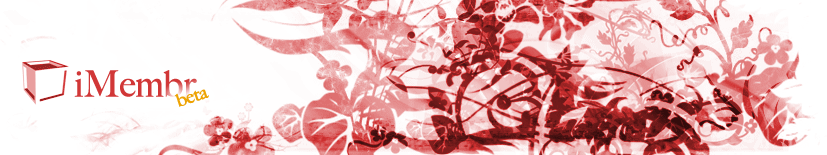
<style>
.page{position:relative;width:827px;height:155px;background:#ffffff}
.page>*{position:absolute;margin:0}
.t1{font:36px "BigCaslon-Medium";letter-spacing:-0.025em;color:#d13737;font-weight:bold}
.t2{font:18px "BigCaslon-Medium";letter-spacing:-0.025em;color:#eda304;font-weight:bold}
</style>
<div class="page">
<p class="t1" style="left:74px;top:70px;width:123px;height:27px">iMembr</p>
<p class="t2" style="left:174px;top:89px;width:35px;height:18px;rotate:-18deg">beta</p>
</div>
